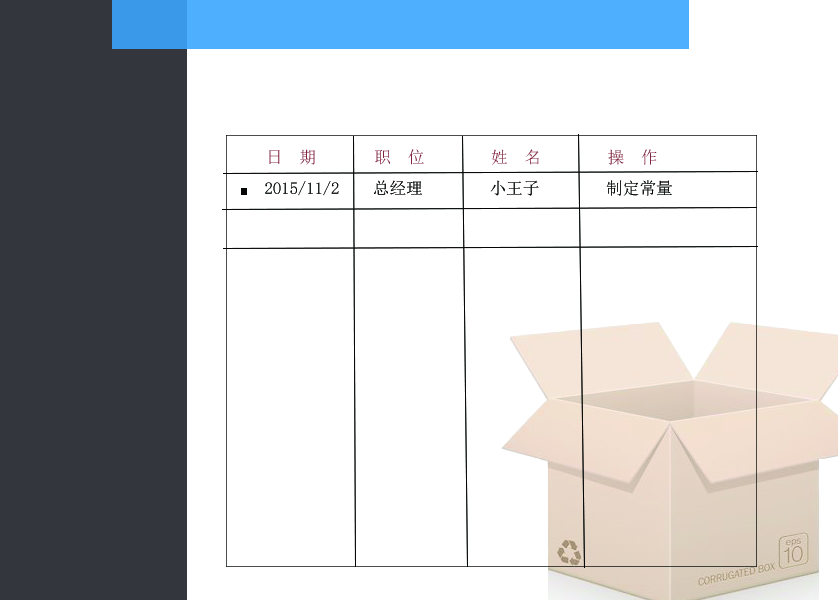
<style>
.page{position:relative;width:838px;height:600px;background:#ffffff}
.page>*{position:absolute;margin:0}
.t1{font:16.7px "SimSun";color:#80233f}
.t2{font:16.7px "SimSun";color:#040606}
.t3{font:19.4px "SimHei";color:#040606}
</style>
<div class="page">
<p class="t1" style="left:269px;top:149px;width:388px;height:16px">日  期       职  位        姓  名        操  作</p>
<p class="t2" style="left:265px;top:180px;width:407px;height:16px"><span class="t3">  </span>2015/11/2    总经理        小王子        制定常量</p>
</div>
